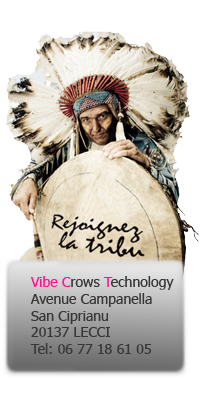
<style>
.page{position:relative;width:200px;height:400px;background:#ffffff}
.page>*{position:absolute;margin:0}
.t1{font:14px "Tahoma";color:#373737}
.t2{font:14px "Tahoma";color:#ff1493}
</style>
<div class="page">
<p class="t1" style="left:30px;top:276px;width:144px;height:78px"><span class="t2">Vibe C</span>rows <span class="t2">T</span>echnology<br>Avenue Campanella<br>San Ciprianu<br>20137 LECCI<br>Tel: 06 77 18 61 05</p>
</div>
